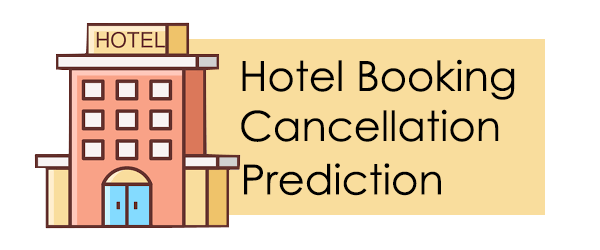
<style>
.page{position:relative;width:600px;height:250px;background:#ffffff}
.page>*{position:absolute;margin:0}
.t1{font:41.7px "CenturyGothic";color:#000000}
</style>
<div class="page">
<p class="t1" style="left:241px;top:59px;width:274px;height:83px">Hotel Booking <br>Cancellation</p>
<p class="t1" style="left:244px;top:163px;width:197px;height:33px">Prediction</p>
</div>
